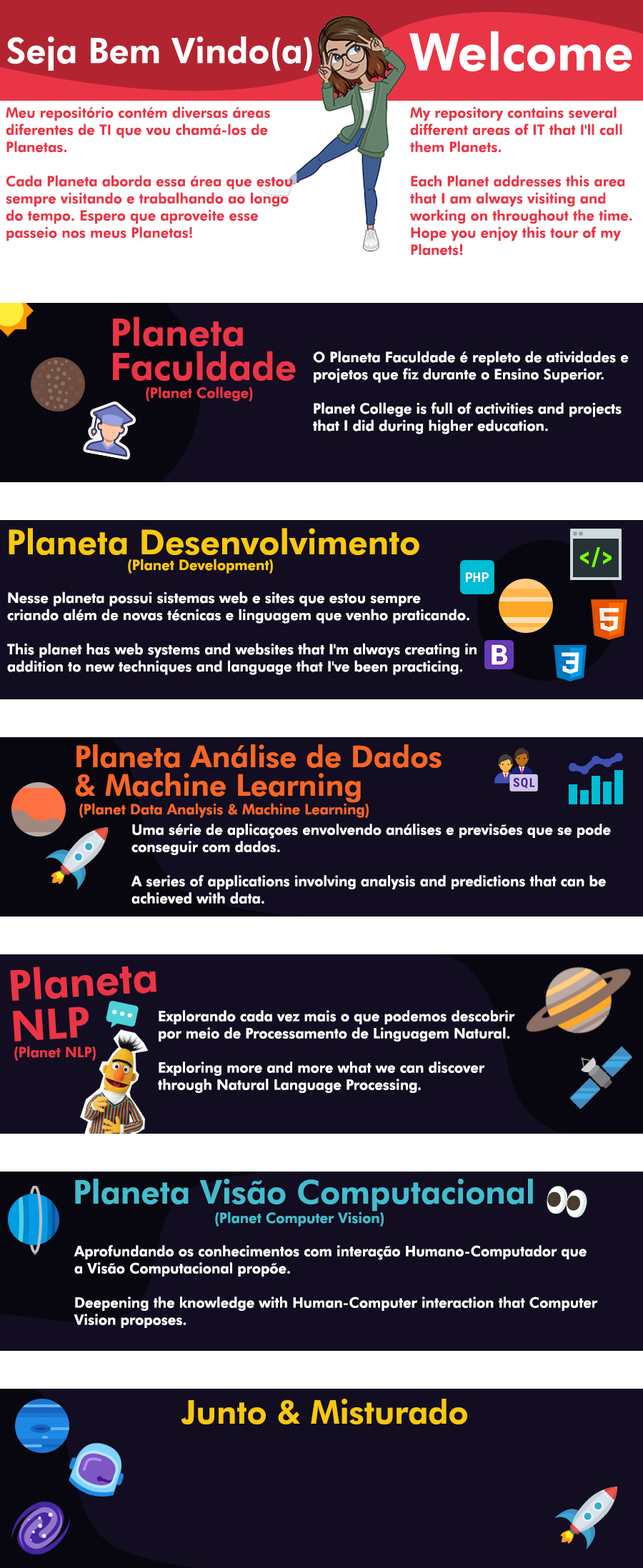
<style>
.page{position:relative;width:643px;height:1568px;background:#120d20}
.page>*{position:absolute;margin:0}
.t1{font:35px "FuturaBT-Heavy";color:#ffffff}
.t2{font:51.6px "FuturaBT-Heavy";color:#ffffff}
.t3{font:14.3px "FuturaBT-Heavy";color:#ea3546}
.t4{font:37.9px/34.3px "FuturaBT-Heavy";color:#ea3546}
.t5{font:14.3px "FuturaBT-Heavy";color:#ffffff}
.t6{font:34.3px "FuturaBT-Heavy";color:#f9c80e}
.t7{font:14.3px "FuturaBT-Heavy";color:#f9c80e}
.t8{font:30px/28.6px "FuturaBT-Heavy";color:#f86624}
.t9{font:14.3px "FuturaBT-Heavy";color:#f86624}
.t10{font:42.1px/40.7px "FuturaBT-Heavy";color:#ea3546}
.t11{font:32.9px "FuturaBT-Heavy";color:#43bccd}
.t12{font:14.3px "FuturaBT-Heavy";color:#43bccd}
.t13{font:32.9px "FuturaBT-Heavy";color:#f9c80e}
</style>
<div class="page">
<p class="t1" style="left:7px;top:36px;width:305px;height:35px">Seja Bem Vindo(a)</p>
<p class="t2" style="left:409px;top:31px;width:223px;height:40px">Welcome</p>
<p class="t3" style="left:6px;top:106px;width:286px;height:135px">Meu repositório contém diversas áreas diferentes de TI que vou chamá-los de Planetas.<br><br>Cada Planeta aborda essa área que estou sempre visitando e trabalhando ao longo do tempo. Espero que aproveite esse passeio nos meus Planetas!</p>
<p class="t3" style="left:409px;top:106px;width:223px;height:150px">My repository contains several different areas of IT that I'll call them Planets.<br><br>Each Planet addresses this area that I am always visiting and working on throughout the time. Hope you enjoy this tour of my Planets!</p>
<p class="t4" style="left:113px;top:316px;width:183px;height:65px">Planeta<br>Faculdade</p>
<p class="t5" style="left:313px;top:351px;width:316px;height:83px">O Planeta Faculdade é repleto de atividades e<br>projetos que fiz durante o Ensino Superior.<br><br>Planet College is full of activities and projects<br>that I did during higher education.</p>
<p class="t3" style="left:146px;top:386px;width:107px;height:15px">(Planet College)</p>
<p class="t6" style="left:9px;top:528px;width:410px;height:27px">Planeta Desenvolvimento</p>
<p class="t7" style="left:128px;top:559px;width:145px;height:15px">(Planet Development)</p>
<p class="t5" style="left:7px;top:591px;width:469px;height:84px">Nesse planeta possui sistemas web e sites que estou sempre<br>criando além de novas técnicas e linguagem que venho praticando.<br><br>This planet has web systems and websites that I'm always creating in<br>addition to new techniques and language that I've been practicing.</p>
<p class="t8" style="left:75px;top:744px;width:366px;height:59px">Planeta Análise de Dados<br>&amp; Machine Learning</p>
<p class="t9" style="left:79px;top:803px;width:290px;height:15px">(Planet Data Analysis &amp; Machine Learning)</p>
<p class="t5" style="left:131px;top:824px;width:480px;height:80px">Uma série de aplicaçoes envolvendo análises e previsões que se pode<br>conseguir com dados.<br><br>A series of applications involving analysis and predictions that can be<br>achieved with data.</p>
<p class="t10" style="left:10px;top:966px;width:146px;height:76px;rotate:-4deg">Planeta<br>NLP</p>
<p class="t5" style="left:158px;top:1010px;width:357px;height:83px">Explorando cada vez mais o que podemos descobrir<br>por meio de Processamento de Linguagem Natural.<br><br>Exploring more and more what we can discover<br>through Natural Language Processing.</p>
<p class="t3" style="left:14px;top:1046px;width:82px;height:15px">(Planet NLP)</p>
<p class="t11" style="left:75px;top:1179px;width:458px;height:33px">Planeta Visão Computacional</p>
<p class="t12" style="left:215px;top:1212px;width:169px;height:15px">(Planet Computer Vision)</p>
<p class="t5" style="left:74px;top:1245px;width:524px;height:83px">Aprofundando os conhecimentos com interação Humano-Computador que<br>a Visão Computacional propõe.<br><br>Deepening the knowledge with Human-Computer interaction that Computer<br>Vision proposes.</p>
<p class="t13" style="left:181px;top:1399px;width:286px;height:25px">Junto &amp; Misturado</p>
</div>
